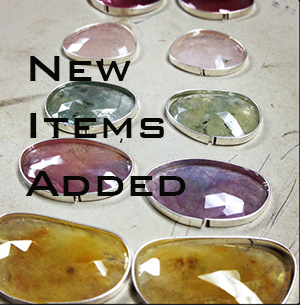
<style>
.page{position:relative;width:300px;height:305px}
.page>*{position:absolute;margin:0}
.t1{font:48px "BankGothicBT-Medium";color:#080807}
</style>
<div class="page">
<p class="t1" style="left:25px;top:56px;width:161px;height:140px">New Items Added</p>
</div>
